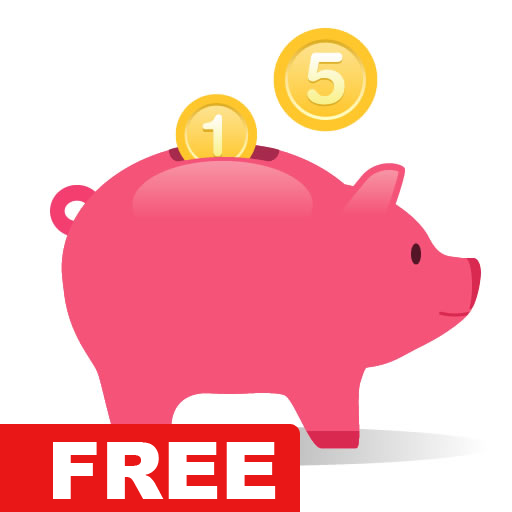
<style>
.page{position:relative;width:512px;height:512px;background:#ffffff}
.page>*{position:absolute;margin:0}
.t1{font:80px "Arial-Black";color:#ffffff}
</style>
<div class="page">
<p class="t1" style="left:53px;top:442px;width:223px;height:57px">FREE</p>
</div>
